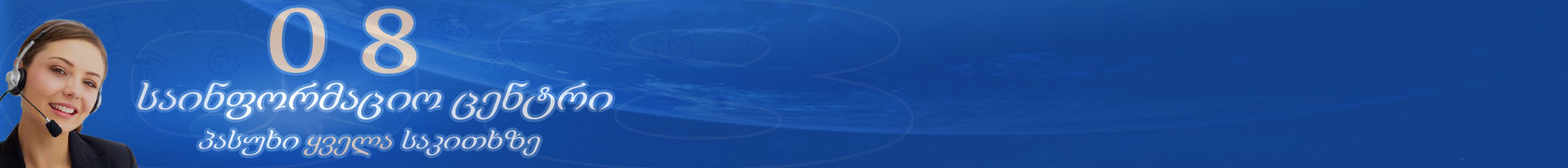
<style>
.page{position:relative;width:1568px;height:168px}
.page>*{position:absolute;margin:0}
.t1{font:92.2px "Sylfaen";color:#d4c5ba;scale:1.34 1}
.t2{font:40.7px "Sylfaen";color:#d8e5f4;scale:1.1 1}
.t3{font:28px "Sylfaen";scale:1.1 1}
</style>
<div class="page">
<p class="t1" style="left:270px;top:7px;width:147px;height:67px;rotate:1deg">0 8</p>
<p class="t2" style="left:137px;top:82px;width:476px;height:37px">საინფორმაციო ცენტრი</p>
<p class="t3" style="left:199px;top:130px;width:341px;height:26px">პასუხი ყველა საკითხზე</p>
</div>
